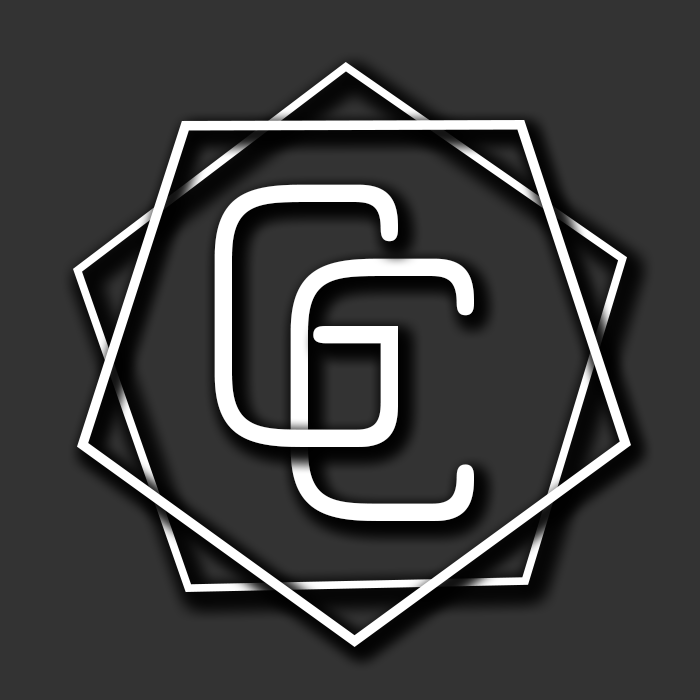
<style>
.page{position:relative;width:700px;height:700px;background:#333333}
.page>*{position:absolute;margin:0}
.t1{font:422.6px "JuraLight";color:#ffffff}
</style>
<div class="page">
<p class="t1" style="left:214px;top:184px;width:184px;height:263px">G</p>
<p class="t1" style="left:290px;top:258px;width:184px;height:263px">C</p>
</div>
